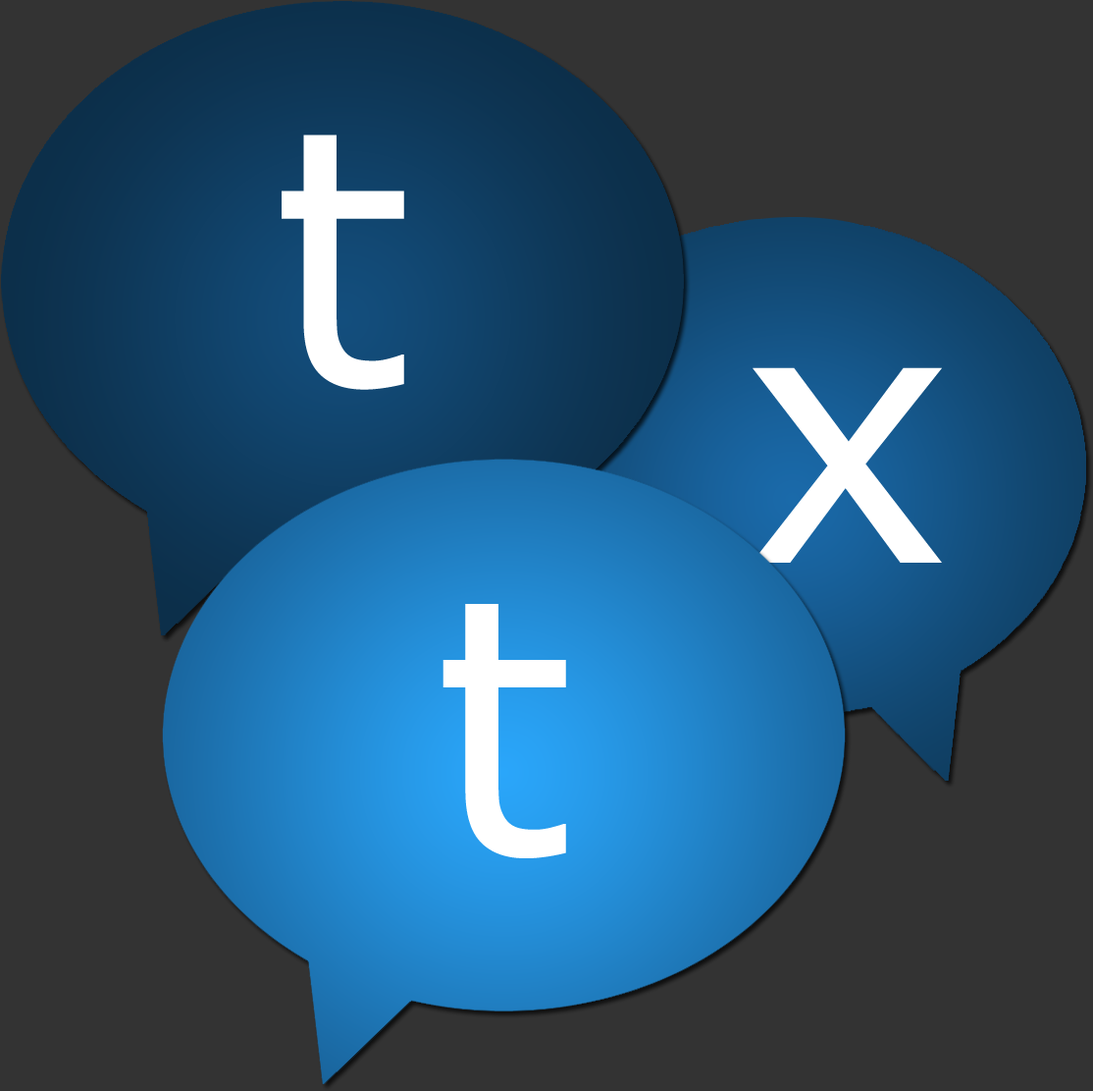
<style>
.page{position:relative;width:1093px;height:1091px;background:#333333}
.page>*{position:absolute;margin:0}
.t1{font:356.2px "Verdana";color:#ffffff}
</style>
<div class="page">
<p class="t1" style="left:282px;top:134px;width:122px;height:256px">t</p>
<p class="t1" style="left:752px;top:367px;width:190px;height:195px">x</p>
<p class="t1" style="left:443px;top:604px;width:123px;height:254px">t</p>
</div>
